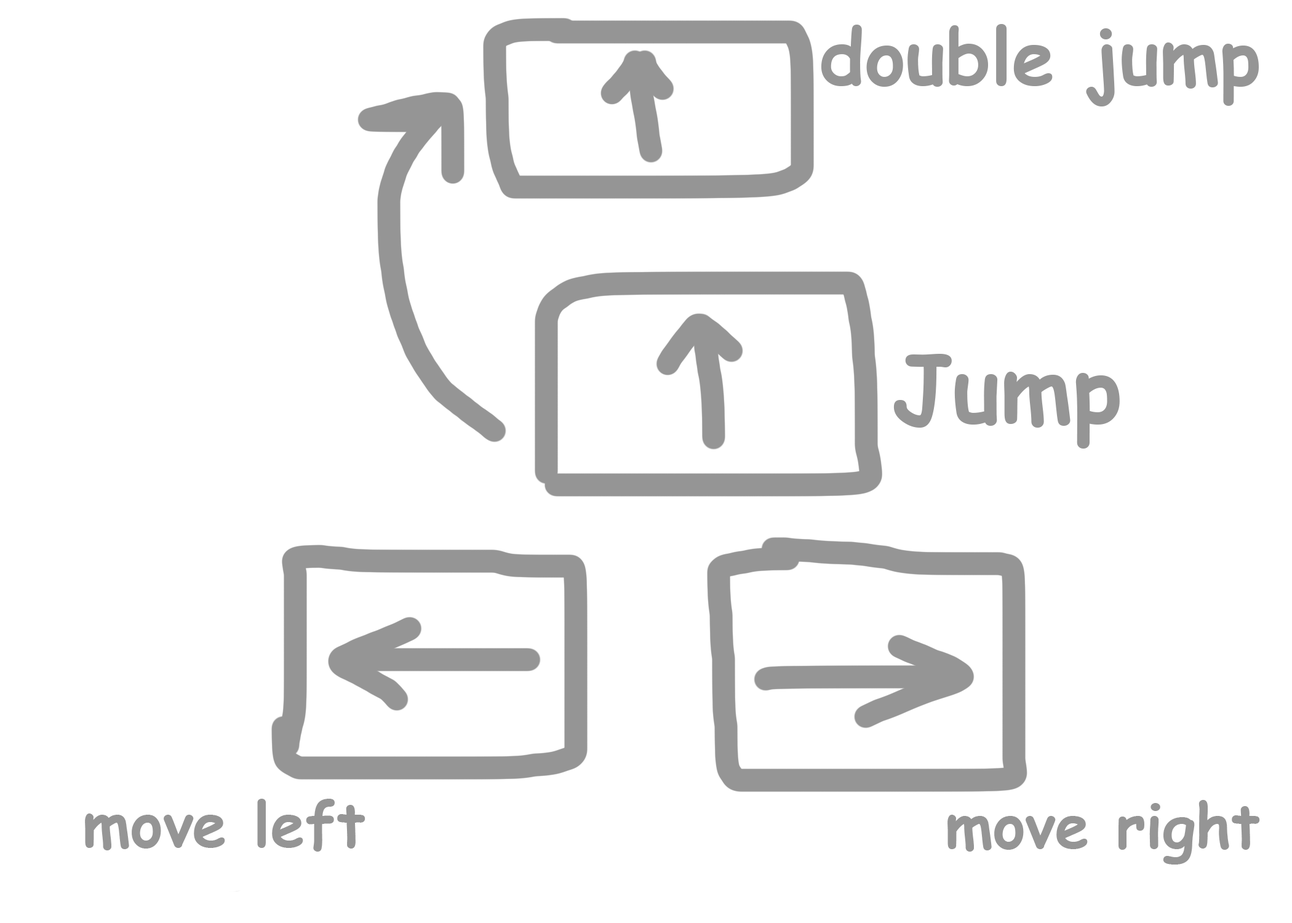
<style>
.page{position:relative;width:1292px;height:923px;background:#ffffff}
.page>*{position:absolute;margin:0}
.t1{font:76.9px "ComicSansMS-Bold";color:#959595}
.t2{font:92.3px "ComicSansMS-Bold";color:#959595}
.t3{font:61.5px "ComicSansMS-Bold";color:#959595}
</style>
<div class="page">
<p class="t1" style="left:821px;top:24px;width:438px;height:82px">double jump</p>
<p class="t2" style="left:893px;top:354px;width:227px;height:95px">Jump</p>
<p class="t3" style="left:85px;top:799px;width:280px;height:53px">move left</p>
<p class="t3" style="left:948px;top:800px;width:312px;height:64px">move right</p>
</div>
